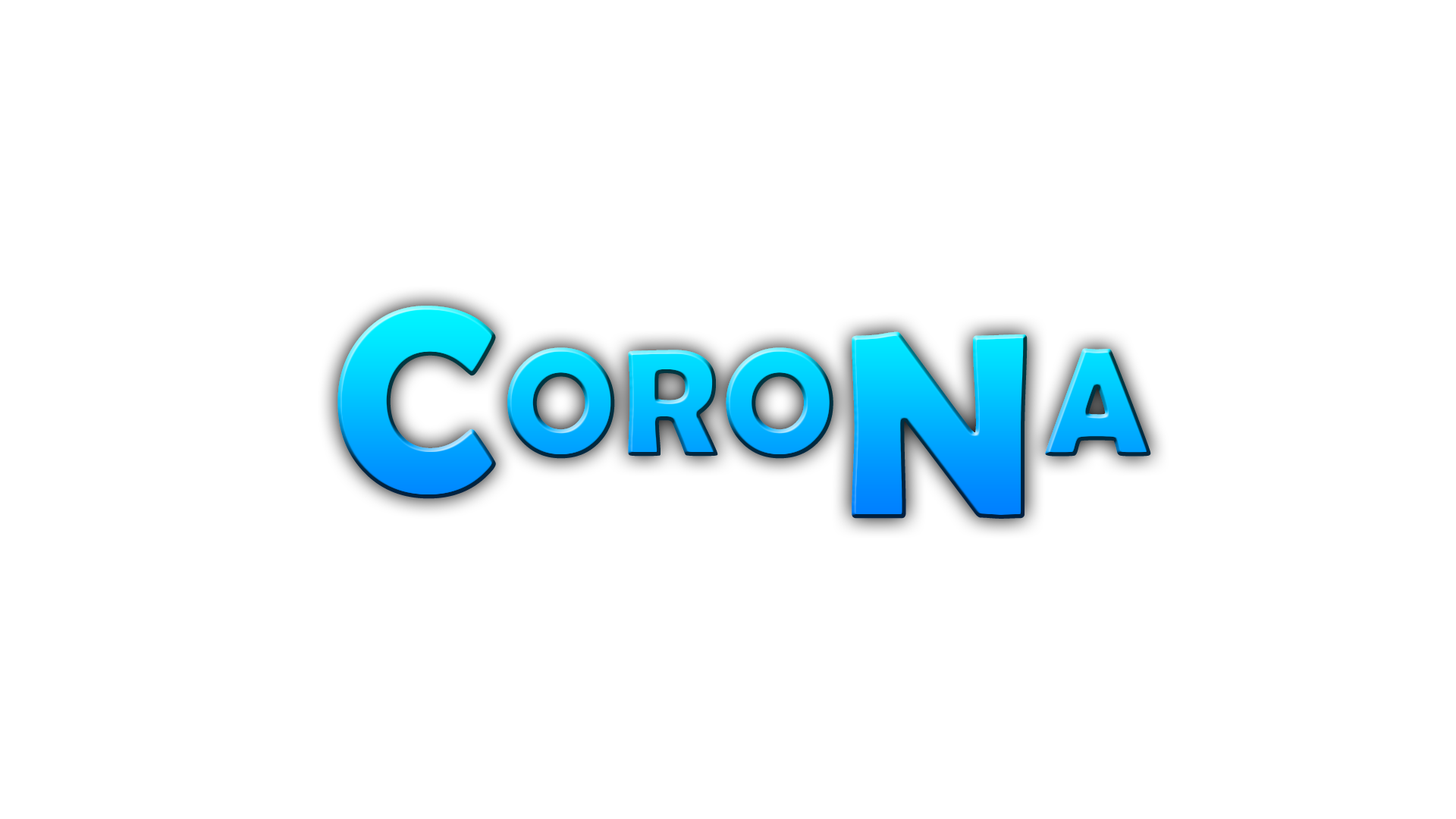
<style>
.page{position:relative;width:1456px;height:819px;background:#ffffff}
.page>*{position:absolute;margin:0}
.t1{font:151.7px "BerlinSansFBDemi-Bold";font-weight:bold}
.t2{font:265.4px "BerlinSansFBDemi-Bold";font-weight:bold}
</style>
<div class="page">
<p class="t1" style="left:337px;top:306px;width:814px;height:213px"><span class="t2">C</span>ORO<span class="t2">N</span>A</p>
</div>
